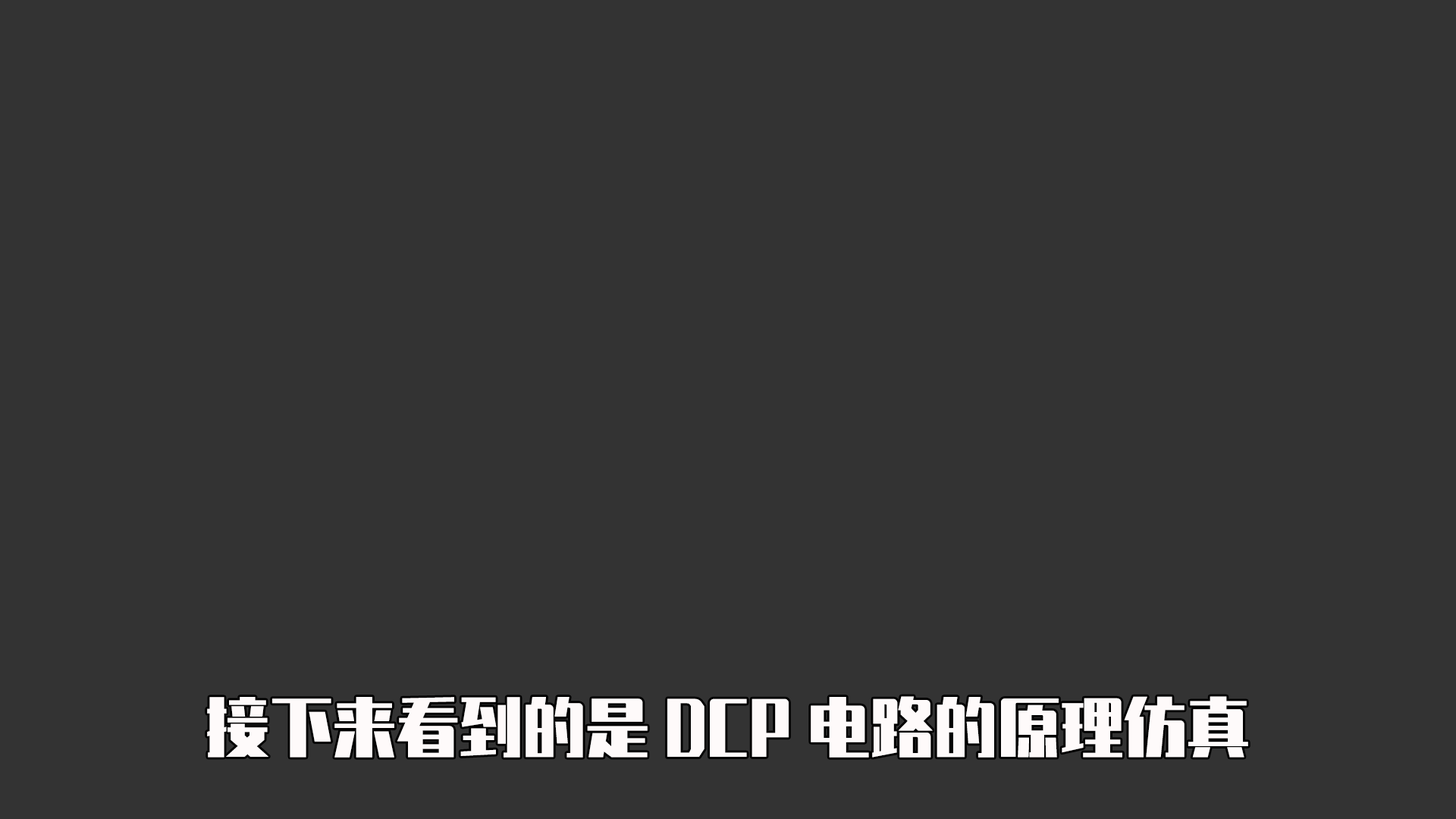
<style>
.page{position:relative;width:1456px;height:819px;background:#333333}
.page>*{position:absolute;margin:0}
.t1{font:63.2px "ZhenyanGB-Regular";color:#fefafa}
</style>
<div class="page">
<p class="t1" style="left:207px;top:696px;width:1041px;height:62px">接下来看到的是DCP电路的原理仿真</p>
</div>
